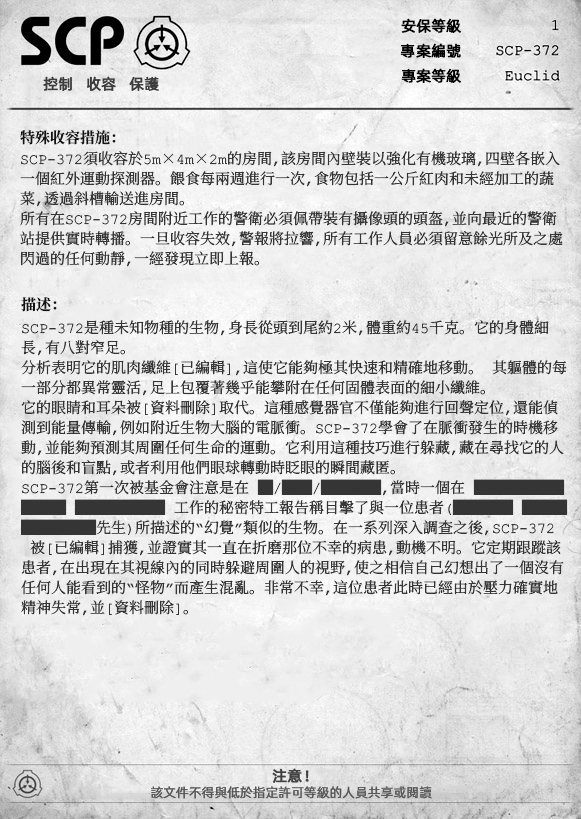
<style>
.page{position:relative;width:581px;height:819px}
.page>*{position:absolute;margin:0}
.t1{font:15px "AlibabaPuHuiTiR";color:#000000;font-weight:bold}
.t2{font:15px "AlibabaPuHuiTiR";color:#3d3d3d;font-weight:bold}
.t3{font:15px "ContainmentBreach-Bold";color:#121212}
.t4{font:15px/20px "ContainmentBreach-Regular";color:#353535}
.t5{font:15px "AlibabaPuHuiTiR";color:#414141;font-weight:bold}
.t6{font:13px "AlibabaPuHuiTiR";color:#575757}
</style>
<div class="page">
<p class="t1" style="left:401px;top:18px;width:60px;height:15px">安保等級</p>
<p class="t1" style="left:400px;top:43px;width:61px;height:15px">專案編號</p>
<p class="t2" style="left:43px;top:76px;width:116px;height:15px">控制   收容   保護</p>
<p class="t1" style="left:401px;top:68px;width:60px;height:15px">專案等級</p>
<p class="t3" style="left:20px;top:130px;width:96px;height:15px">特殊收容措施：</p>
<p class="t4" style="left:20px;top:151px;width:543px;height:116px">SCP-372須收容於5m×4m×2m的房間，該房間內壁裝以強化有機玻璃，四壁各嵌入<br>一個紅外運動探測器。餵食每兩週進行一次，食物包括一公斤紅肉和未經加工的蔬<br>菜，透過斜槽輸送進房間。<br>所有在SCP-372房間附近工作的警衛必須佩帶裝有攝像頭的頭盔，並向最近的警衛<br>站提供實時轉播。一旦收容失效，警報將拉響，所有工作人員必須留意餘光所及之處<br>閃過的任何動靜，一經發現立即上報。</p>
<p class="t3" style="left:21px;top:297px;width:36px;height:15px">描述：</p>
<p class="t4" style="left:21px;top:320px;width:547px;height:296px">SCP-372是種未知物種的生物，身長從頭到尾約2米，體重約45千克。它的身體細<br>長，有八對窄足。<br>分析表明它的肌肉纖維[已編輯]，這使它能夠極其快速和精確地移動。 其軀體的每<br>一部分都異常靈活，足上包覆著幾乎能攀附在任何固體表面的細小纖維。<br>它的眼睛和耳朵被[資料刪除]取代。這種感覺器官不僅能夠進行回聲定位，還能偵<br>測到能量傳輸，例如附近生物大腦的電脈衝。SCP-372學會了在脈衝發生的時機移<br>動，並能夠預測其周圍任何生命的運動。它利用這種技巧進行躲藏，藏在尋找它的人<br>的腦後和盲點，或者利用他們眼球轉動時眨眼的瞬間藏匿。<br>SCP-372第一次被基金會注意是在 █/██/████，當時一個在 ██████<br>███ ██████ 工作的秘密特工報告稱目擊了與一位患者（████ ███<br>█████先生）所描述的“幻覺”類似的生物。在一系列深入調查之後，SCP-372<br> 被[已編輯]捕獲，並證實其一直在折磨那位不幸的病患，動機不明。它定期跟蹤該<br>患者，在出現在其視線內的同時躲避周圍人的視野，使之相信自己幻想出了一個沒有<br>任何人能看到的“怪物”而產生混亂。非常不幸，這位患者此時已經由於壓力確實地<br>精神失常，並[資料刪除]。</p>
<p class="t5" style="left:272px;top:768px;width:37px;height:15px">注意！</p>
<p class="t6" style="left:151px;top:786px;width:281px;height:13px">該文件不得與低於指定許可等級的人員共享或閱讀</p>
</div>
